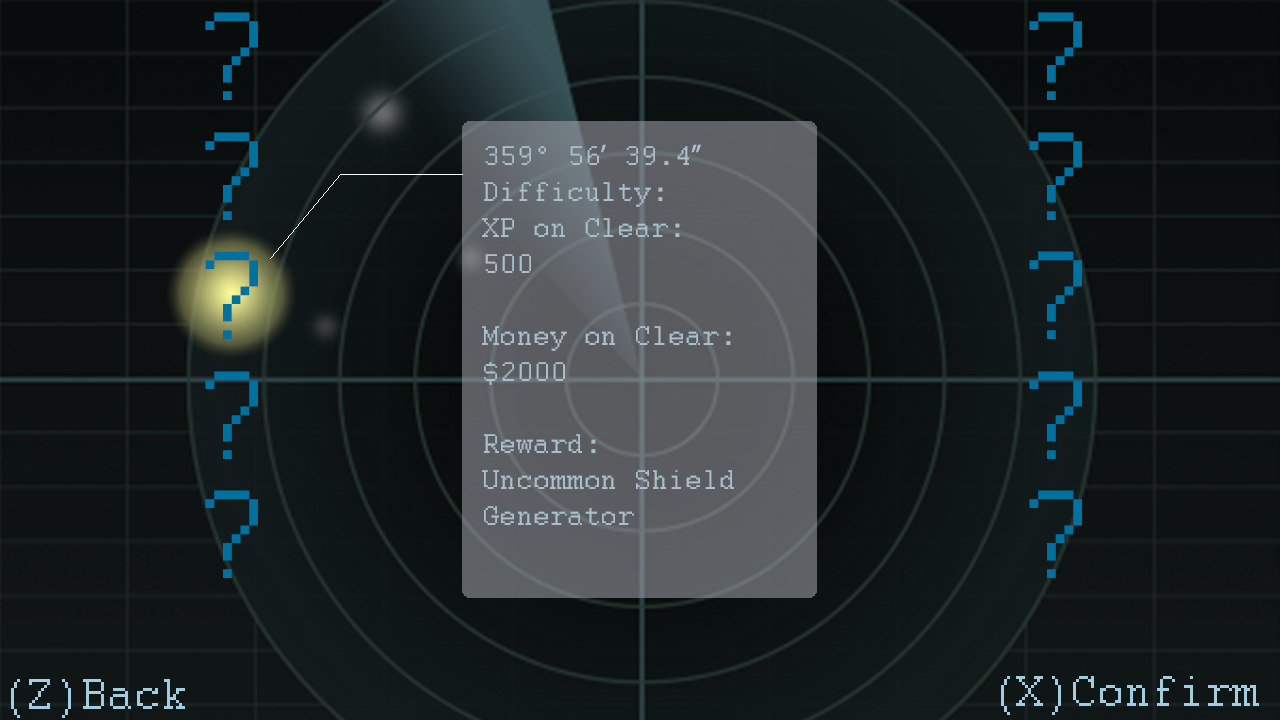
<style>
.page{position:relative;width:1280px;height:720px}
.page>*{position:absolute;margin:0}
.t1{font:140px "Courier";color:#00709f}
.t2{font:30px "Courier";color:#a2cdde}
.t3{font:30px "MyriadPro-Regular";color:#a2cdde}
.t4{font:48px "Courier";color:#a2cdde}
</style>
<div class="page">
<p class="t1" style="left:205px;top:12px;width:53px;height:88px">?</p>
<p class="t1" style="left:1029px;top:12px;width:53px;height:88px">?</p>
<p class="t1" style="left:205px;top:132px;width:53px;height:88px">?</p>
<p class="t1" style="left:1029px;top:132px;width:53px;height:88px">?</p>
<p class="t2" style="left:482px;top:144px;width:252px;height:381px">359° 56<span class="t3">’</span> 39.4<span class="t3">”<br></span>Difficulty:<br>XP on Clear:<br>500<br><br>Money on Clear:<br>$2000<br><br>Reward:<br>Uncommon Shield<br>Generator</p>
<p class="t1" style="left:205px;top:251px;width:53px;height:88px">?</p>
<p class="t1" style="left:1029px;top:251px;width:53px;height:88px">?</p>
<p class="t1" style="left:205px;top:371px;width:53px;height:88px">?</p>
<p class="t1" style="left:1029px;top:371px;width:53px;height:88px">?</p>
<p class="t1" style="left:205px;top:490px;width:53px;height:88px">?</p>
<p class="t1" style="left:1029px;top:490px;width:53px;height:88px">?</p>
<p class="t4" style="left:1001px;top:676px;width:258px;height:39px">(X)Confirm</p>
<p class="t4" style="left:11px;top:679px;width:174px;height:39px">(Z)Back</p>
</div>
